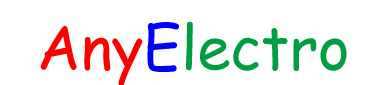
<style>
.page{position:relative;width:369px;height:85px;background:#ffffff}
.page>*{position:absolute;margin:0}
.t1{font:60px "ComicSansMS";color:#009d42}
.t2{font:60px "ComicSansMS";color:#ff0000}
.t3{font:60px "ComicSansMS";color:#0000ff}
</style>
<div class="page">
<p class="t1" style="left:40px;top:21px;width:307px;height:65px"><span class="t2">Any</span><span class="t3">E</span>lectro</p>
</div>
